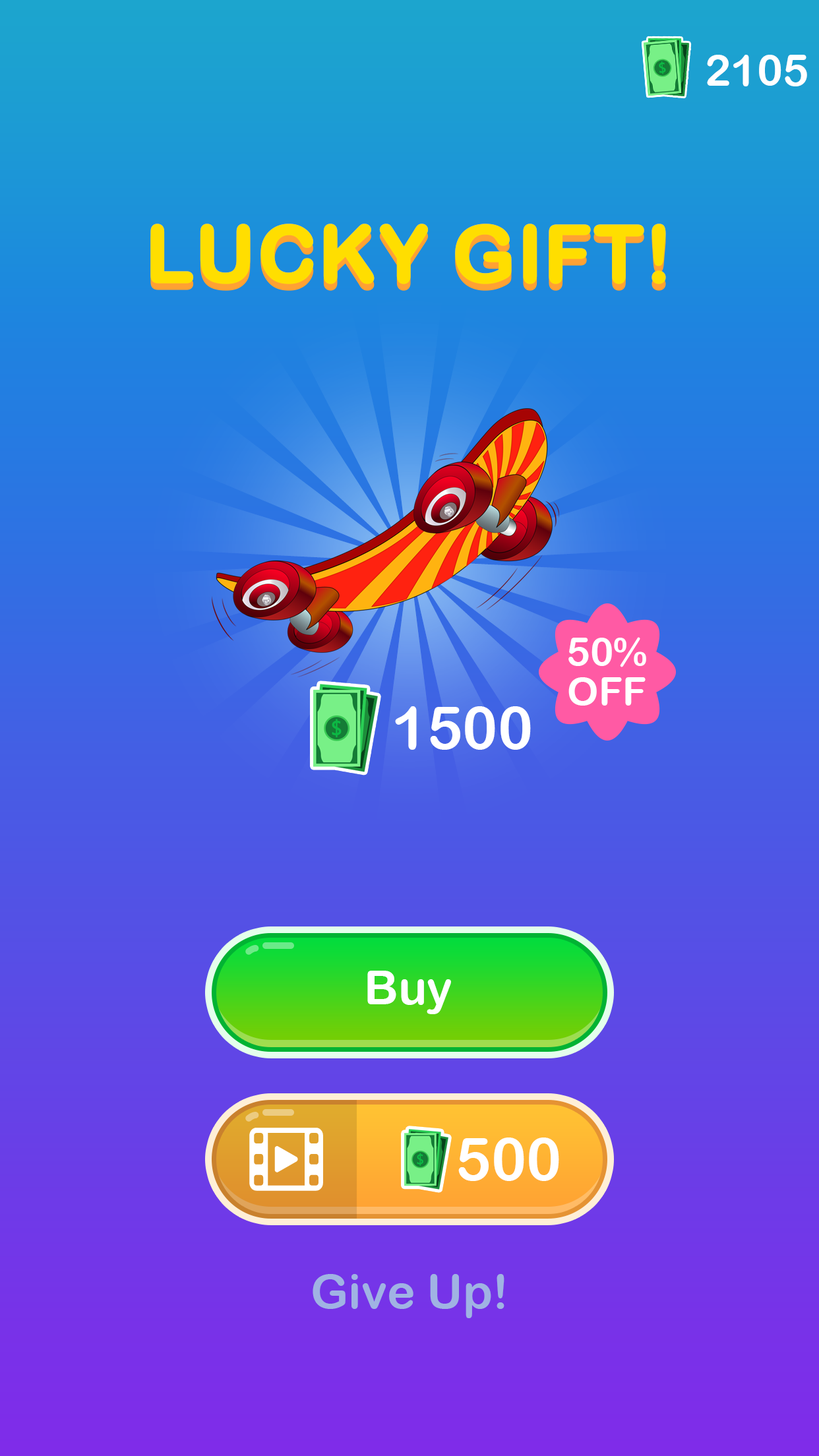
<style>
.page{position:relative;width:819px;height:1456px}
.page>*{position:absolute;margin:0}
.t1{font:43.5px "ArialRoundedMTBold";color:#ffffff}
.t2{font:79.1px "ArialRoundedMTBold";color:#ffde00;font-weight:bold}
.t3{font:39.6px/39.6px "ArialRoundedMTBold";color:#ffffff}
.t4{font:59.3px "ArialRoundedMTBold";color:#ffffff}
.t5{font:47.5px "ArialRoundedMTBold";color:#ffffff}
.t6{font:47.5px "ArialRoundedMTBold";color:#a0b3e3}
</style>
<div class="page">
<p class="t1" style="left:707px;top:55px;width:100px;height:31px">2105</p>
<p class="t2" style="left:150px;top:224px;width:516px;height:60px">LUCKY GIFT!</p>
<p class="t3" style="left:568px;top:637px;width:78px;height:69px;text-align:center">50%<br>OFF</p>
<p class="t4" style="left:395px;top:706px;width:136px;height:44px">1500</p>
<p class="t5" style="left:367px;top:971px;width:84px;height:43px">Buy</p>
<p class="t4" style="left:458px;top:1137px;width:101px;height:44px">500</p>
<p class="t6" style="left:313px;top:1274px;width:191px;height:44px">Give Up!</p>
</div>
